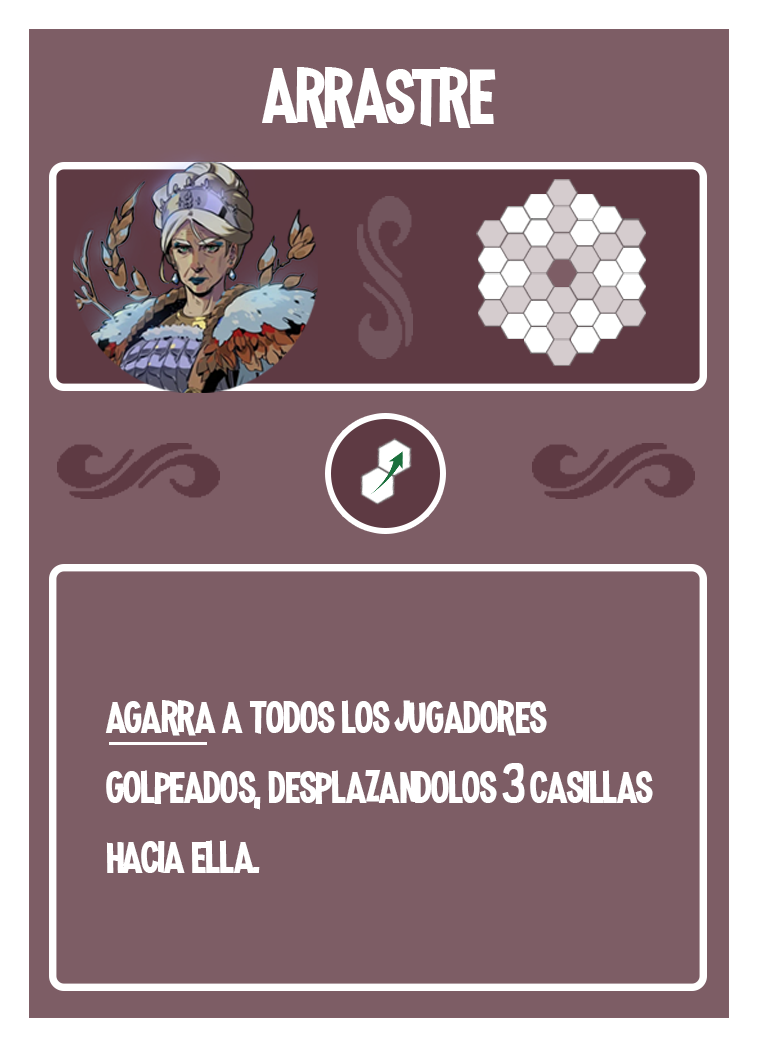
<style>
.page{position:relative;width:758px;height:1047px;background:#7d5d65}
.page>*{position:absolute;margin:0}
.t1{font:100px "MadnessHyperactive";color:#ffffff}
.t2{font:58.3px "MadnessHyperactive";color:#ffffff}
</style>
<div class="page">
<p class="t1" style="left:262px;top:67px;width:234px;height:61px">arrastre</p>
<p class="t2" style="left:105px;top:700px;width:548px;height:173px">agarra a todos los jugadores golpeados, desplazandolos 3 casillas hacia ella.</p>
</div>
